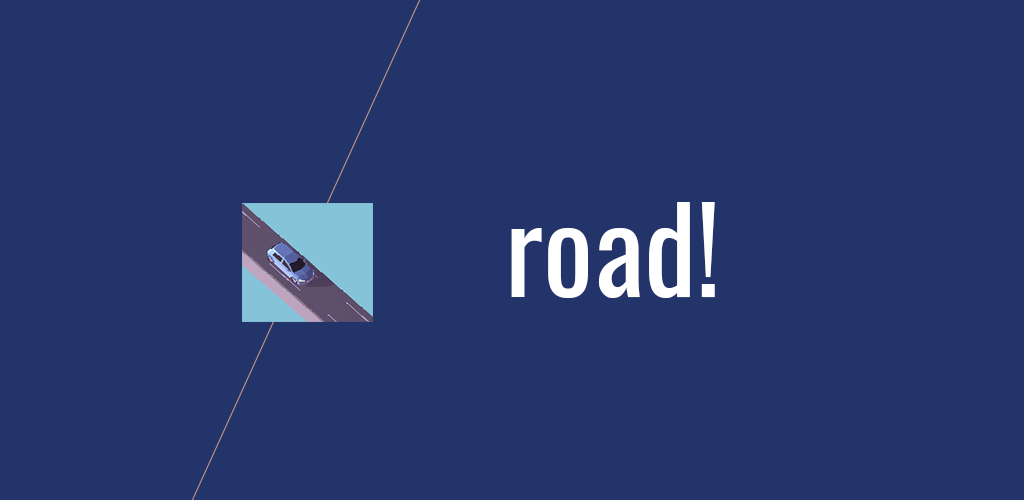
<style>
.page{position:relative;width:1024px;height:500px;background:#22346a}
.page>*{position:absolute;margin:0}
.t1{font:118.1px "Oswald-Regular";color:#ffffff}
</style>
<div class="page">
<p class="t1" style="left:511px;top:202px;width:204px;height:96px">road!</p>
</div>
